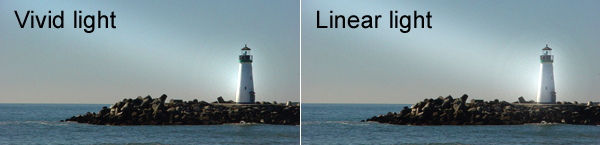
<style>
.page{position:relative;width:600px;height:145px}
.page>*{position:absolute;margin:0}
.t1{font:24px "ArialMT";color:#000000}
</style>
<div class="page">
<p class="t1" style="left:14px;top:10px;width:102px;height:23px">Vivid light</p>
<p class="t1" style="left:317px;top:10px;width:115px;height:23px">Linear light</p>
</div>
